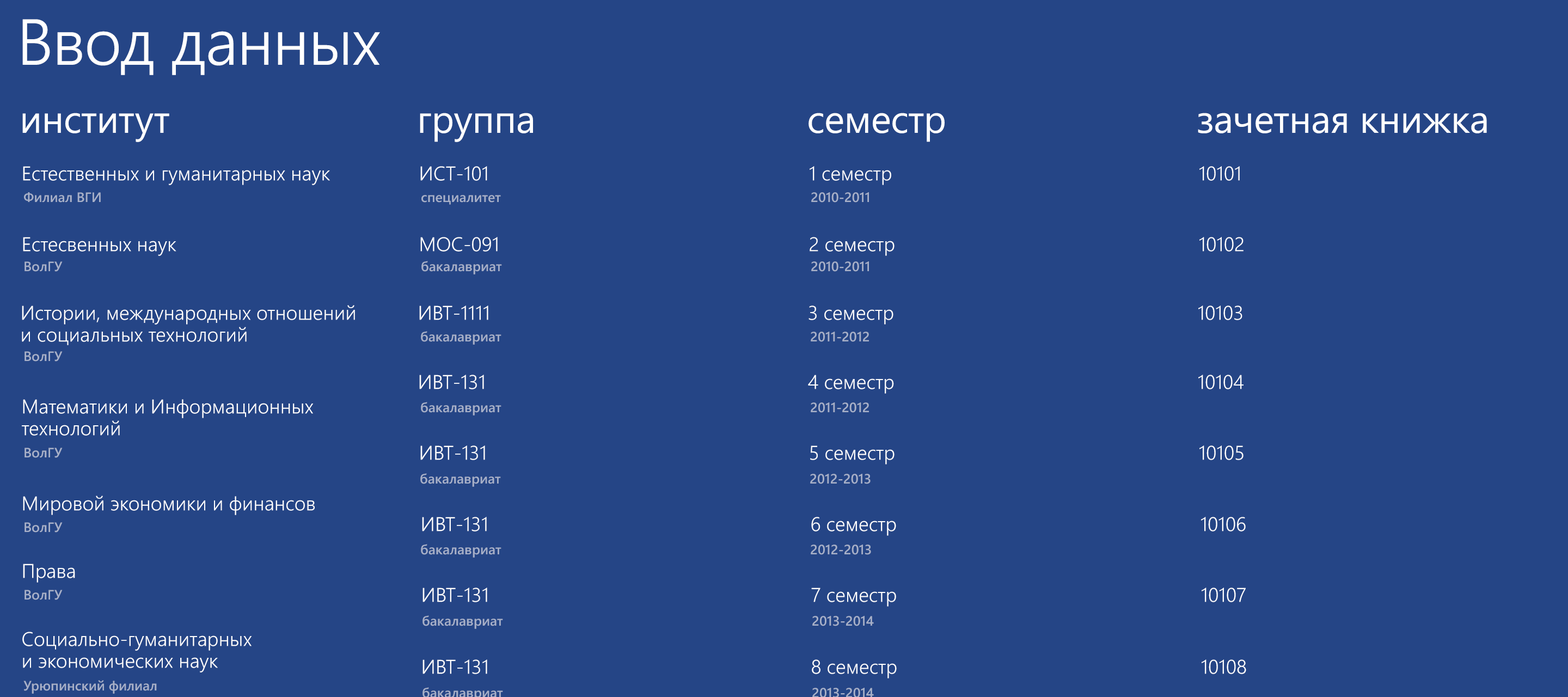
<style>
.page{position:relative;width:1568px;height:697px;background:#254586}
.page>*{position:absolute;margin:0}
.t1{font:64.8px "SegoeWP-SemiLight";letter-spacing:-0.01em;color:#ffffff}
.t2{font:38.7px "SegoeWP";letter-spacing:-0.01em;color:#ffffff}
.t3{font:19.8px "SegoeWP-SemiLight";color:#ffffff}
.t4{font:13.6px "SegoeWP-Semibold";color:#a7b0c8}
.t5{font:19.8px/21.8px "SegoeWP-SemiLight";color:#ffffff}
</style>
<div class="page">
<p class="t1" style="left:22px;top:19px;width:358px;height:56px">Ввод данных</p>
<p class="t2" style="left:22px;top:113px;width:147px;height:29px">институт</p>
<p class="t2" style="left:420px;top:113px;width:113px;height:29px">группа</p>
<p class="t2" style="left:808px;top:113px;width:137px;height:29px">семестр</p>
<p class="t2" style="left:1198px;top:113px;width:289px;height:20px">зачетная книжка</p>
<p class="t3" style="left:23px;top:166px;width:307px;height:19px">Естественных и гуманитарных наук</p>
<p class="t3" style="left:420px;top:166px;width:67px;height:15px">ИСТ-101</p>
<p class="t3" style="left:810px;top:166px;width:81px;height:19px">1 семестр</p>
<p class="t3" style="left:1199px;top:166px;width:41px;height:15px">10101</p>
<p class="t4" style="left:24px;top:192px;width:77px;height:11px">Филиал ВГИ</p>
<p class="t4" style="left:421px;top:195px;width:80px;height:10px">специалитет</p>
<p class="t4" style="left:811px;top:192px;width:58px;height:11px">2010-2011</p>
<p class="t3" style="left:23px;top:237px;width:153px;height:19px">Естесвенных наук</p>
<p class="t3" style="left:420px;top:237px;width:78px;height:15px">МОС-091</p>
<p class="t3" style="left:810px;top:237px;width:85px;height:19px">2 семестр</p>
<p class="t3" style="left:1199px;top:237px;width:45px;height:15px">10102</p>
<p class="t4" style="left:24px;top:261px;width:39px;height:11px">ВолГУ</p>
<p class="t4" style="left:421px;top:261px;width:81px;height:13px">бакалавриат</p>
<p class="t4" style="left:811px;top:261px;width:58px;height:11px">2010-2011</p>
<p class="t5" style="left:22px;top:305px;width:333px;height:40px">Истории, международных отношений <br>и социальных технологий</p>
<p class="t3" style="left:419px;top:305px;width:69px;height:15px">ИВТ-1111</p>
<p class="t3" style="left:808px;top:305px;width:85px;height:19px">3 семестр</p>
<p class="t3" style="left:1198px;top:305px;width:44px;height:15px">10103</p>
<p class="t4" style="left:421px;top:331px;width:80px;height:14px">бакалавриат</p>
<p class="t4" style="left:811px;top:332px;width:58px;height:10px">2011-2012</p>
<p class="t4" style="left:24px;top:351px;width:39px;height:11px">ВолГУ</p>
<p class="t3" style="left:419px;top:375px;width:65px;height:14px">ИВТ-131</p>
<p class="t3" style="left:808px;top:375px;width:86px;height:19px">4 семестр</p>
<p class="t3" style="left:1198px;top:375px;width:46px;height:14px">10104</p>
<p class="t5" style="left:22px;top:399px;width:292px;height:37px">Математики и Информационных <br>технологий</p>
<p class="t4" style="left:421px;top:402px;width:80px;height:13px">бакалавриат</p>
<p class="t4" style="left:811px;top:402px;width:58px;height:11px">2011-2012</p>
<p class="t4" style="left:24px;top:448px;width:39px;height:10px">ВолГУ</p>
<p class="t3" style="left:420px;top:445px;width:65px;height:15px">ИВТ-131</p>
<p class="t3" style="left:810px;top:445px;width:85px;height:19px">5 семестр</p>
<p class="t3" style="left:1199px;top:445px;width:45px;height:15px">10105</p>
<p class="t4" style="left:420px;top:473px;width:81px;height:14px">бакалавриат</p>
<p class="t4" style="left:810px;top:474px;width:61px;height:10px">2012-2013</p>
<p class="t3" style="left:23px;top:495px;width:292px;height:20px">Мировой экономики и финансов</p>
<p class="t3" style="left:422px;top:517px;width:65px;height:14px">ИВТ-131</p>
<p class="t3" style="left:811px;top:517px;width:85px;height:19px">6 семестр</p>
<p class="t3" style="left:1201px;top:517px;width:45px;height:14px">10106</p>
<p class="t4" style="left:24px;top:522px;width:39px;height:10px">ВолГУ</p>
<p class="t4" style="left:421px;top:544px;width:80px;height:14px">бакалавриат</p>
<p class="t4" style="left:811px;top:544px;width:60px;height:11px">2012-2013</p>
<p class="t3" style="left:23px;top:564px;width:52px;height:19px">Права</p>
<p class="t4" style="left:24px;top:590px;width:39px;height:10px">ВолГУ</p>
<p class="t3" style="left:422px;top:587px;width:65px;height:15px">ИВТ-131</p>
<p class="t3" style="left:811px;top:587px;width:85px;height:20px">7 семестр</p>
<p class="t3" style="left:1202px;top:587px;width:44px;height:15px">10107</p>
<p class="t4" style="left:422px;top:615px;width:81px;height:14px">бакалавриат</p>
<p class="t4" style="left:812px;top:616px;width:62px;height:10px">2013-2014</p>
<p class="t5" style="left:22px;top:632px;width:230px;height:40px">Социально-гуманитарных <br>и экономических наук</p>
<p class="t3" style="left:422px;top:659px;width:65px;height:15px">ИВТ-131</p>
<p class="t3" style="left:812px;top:659px;width:85px;height:19px">8 семестр</p>
<p class="t3" style="left:1202px;top:659px;width:44px;height:15px">10108</p>
<p class="t4" style="left:23px;top:680px;width:134px;height:14px">Урюпинский филиал</p>
<p class="t4" style="left:812px;top:688px;width:62px;height:10px">2013-2014</p>
</div>
